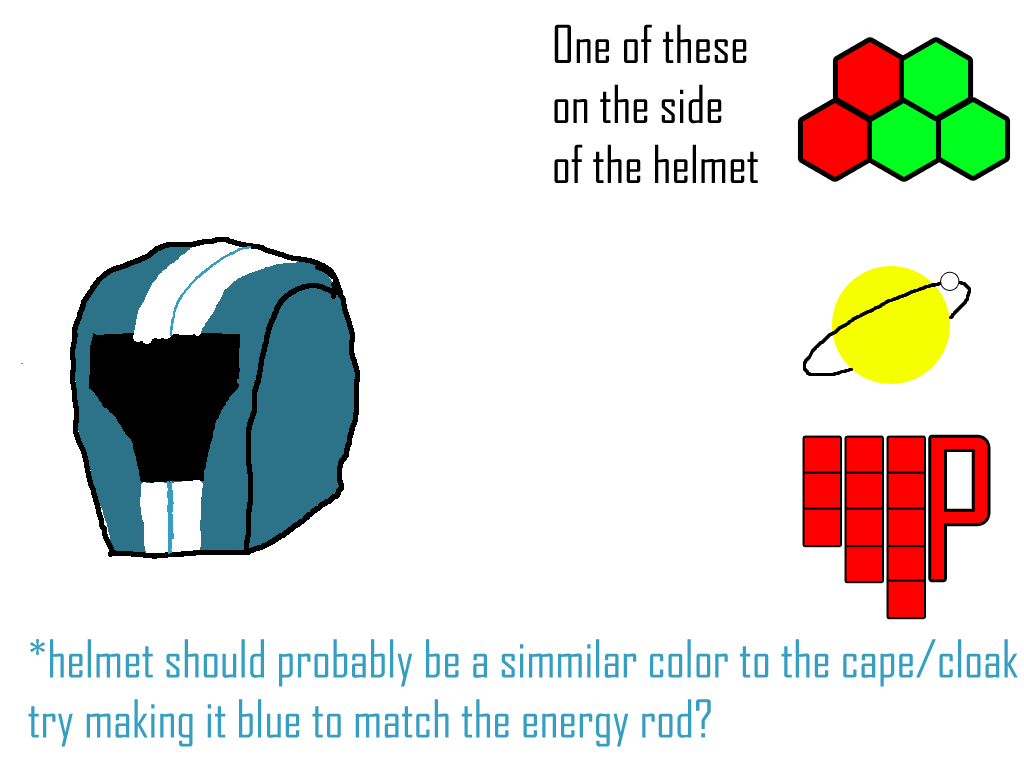
<style>
.page{position:relative;width:1024px;height:768px;background:#ffffff}
.page>*{position:absolute;margin:0}
.t1{font:50px/60px "AgencyFB-Reg";color:#000000}
.t2{font:185px "AgencyFB-Reg";color:#ff0000}
.t3{font:50px/60px "AgencyFB-Reg";color:#369ec0}
</style>
<div class="page">
<p class="t1" style="left:554px;top:24px;width:204px;height:159px">One of these<br>on the side<br>of the helmet</p>
<p class="t2" style="left:931px;top:437px;width:57px;height:143px">P</p>
<p class="t3" style="left:28px;top:639px;width:990px;height:108px">*helmet should probably be a simmilar color to the cape/cloak<br>try making it blue to match the energy rod?</p>
</div>
